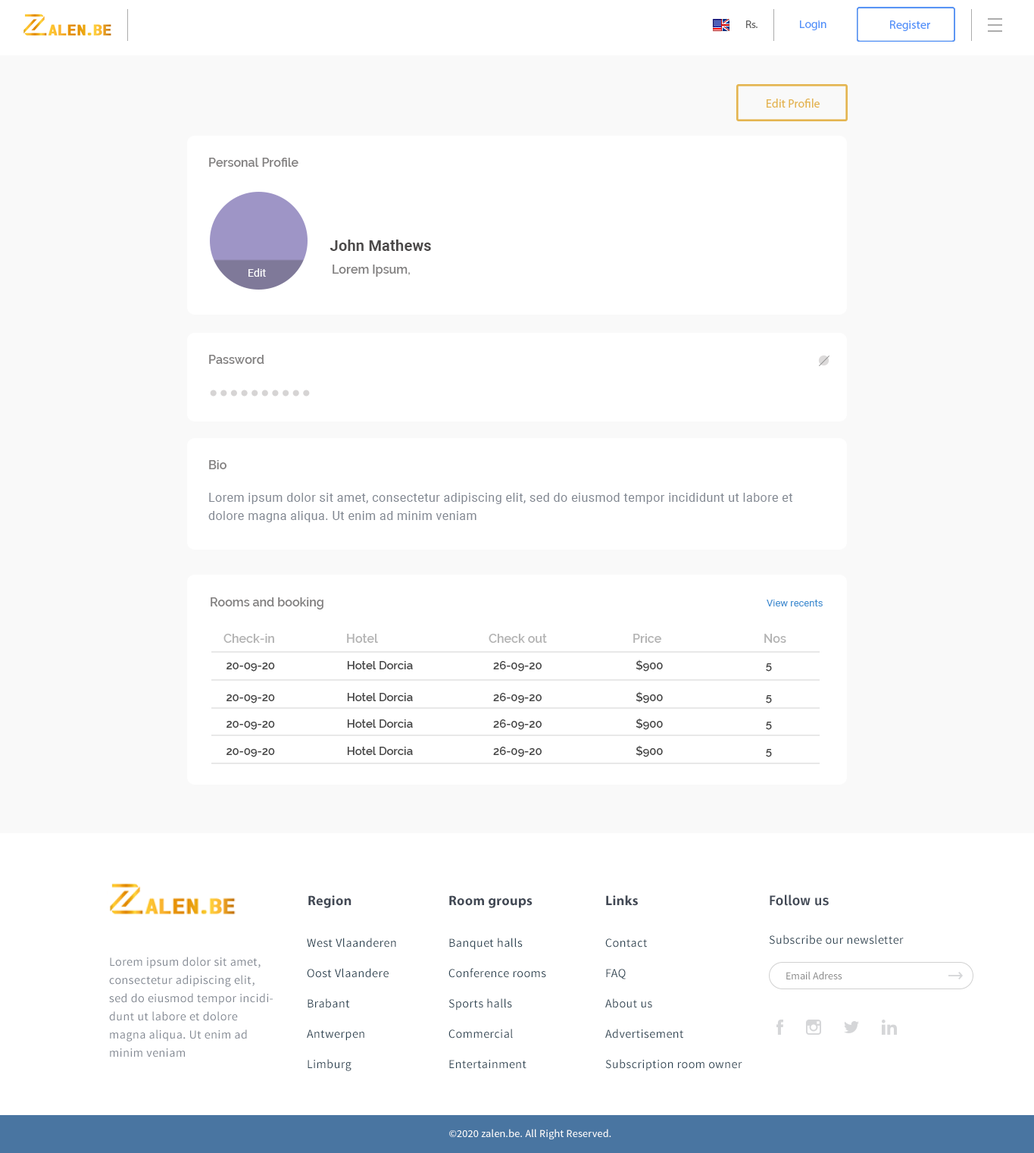
<style>
.page{position:relative;width:1034px;height:1153px;background:#ffffff}
.page>*{position:absolute;margin:0}
.t1{font:10.7px "MyriadPro-Regular";color:#636363;scale:1.04 1}
.t2{font:11.1px "MyriadPro-Regular";color:#5392f9;scale:1.07 1}
.t3{font:12.1px "MyriadPro-Regular";color:#5392f9}
.t4{font:12.1px "MyriadPro-Regular";color:#e4b551}
.t5{font:12.1px "Raleway-SemiBold";color:#817f7f}
.t6{font:15.2px "Roboto-Bold";letter-spacing:0.01em;color:#4b4949}
.t7{font:10.6px "Roboto-Regular";letter-spacing:0.01em;color:#ffffff}
.t8{font:12.1px/18.2px "Roboto-Regular";letter-spacing:0.03em;color:#818791}
.t9{font:9.9px "Roboto-Regular";color:#4290d2}
.t10{font:12.1px "Raleway-SemiBold";color:#b3b3b3}
.t11{font:11.2px "Raleway-SemiBold";color:#444444}
.t12{font:13.6px "MyriadPro-Bold";letter-spacing:0.02em;color:#424955}
.t13{font:13.6px "FiraSans-Medium";letter-spacing:0.02em;color:#424955}
.t14{font:12.1px/30.3px "SourceSansPro-Regular";letter-spacing:0.03em;color:#2e4453}
.t15{font:12.1px "SourceSansPro-Regular";letter-spacing:0.03em;color:#2e4453}
.t16{font:12.1px/18.2px "SourceSansPro-Regular";letter-spacing:0.03em;color:#818791}
.t17{font:10.6px "SourceSansPro-Regular";color:#8c8c8c}
.t18{font:10.6px "SourceSansPro-Regular";letter-spacing:0.02em;color:#ffffff}
</style>
<div class="page">
<p class="t1" style="left:746px;top:20px;width:12px;height:8px">Rs.</p>
<p class="t2" style="left:800px;top:20px;width:27px;height:10px">Login</p>
<p class="t3" style="left:890px;top:20px;width:41px;height:11px">Register</p>
<p class="t4" style="left:767px;top:99px;width:53px;height:9px">Edit Profile</p>
<p class="t5" style="left:209px;top:158px;width:90px;height:9px">Personal Profile</p>
<p class="t6" style="left:330px;top:239px;width:101px;height:12px">John Mathews</p>
<p class="t7" style="left:249px;top:268px;width:17px;height:9px">Edit</p>
<p class="t5" style="left:333px;top:264px;width:77px;height:13px">Lorem Ipsum,</p>
<p class="t5" style="left:209px;top:355px;width:55px;height:9px">Password</p>
<p class="t5" style="left:209px;top:460px;width:18px;height:9px">Bio</p>
<p class="t8" style="left:208px;top:493px;width:585px;height:29px">Lorem ipsum dolor sit amet, consectetur adipiscing elit, sed do eiusmod tempor incididunt ut labore et dolore magna aliqua. Ut enim ad minim veniam</p>
<p class="t5" style="left:211px;top:597px;width:113px;height:12px">Rooms and booking</p>
<p class="t9" style="left:767px;top:599px;width:56px;height:7px">View recents</p>
<p class="t10" style="left:224px;top:634px;width:50px;height:9px">Check-in</p>
<p class="t10" style="left:347px;top:634px;width:31px;height:9px">Hotel</p>
<p class="t10" style="left:489px;top:634px;width:58px;height:9px">Check out</p>
<p class="t10" style="left:634px;top:634px;width:28px;height:9px">Price</p>
<p class="t10" style="left:765px;top:634px;width:22px;height:9px">Nos</p>
<p class="t11" style="left:227px;top:662px;width:48px;height:9px">20-09-20</p>
<p class="t11" style="left:347px;top:661px;width:66px;height:8px">Hotel Dorcia</p>
<p class="t11" style="left:493px;top:661px;width:49px;height:10px">26-09-20</p>
<p class="t11" style="left:636px;top:659px;width:27px;height:12px">$900</p>
<p class="t11" style="left:766px;top:663px;width:6px;height:8px">5</p>
<p class="t11" style="left:227px;top:694px;width:48px;height:9px">20-09-20</p>
<p class="t11" style="left:347px;top:693px;width:66px;height:8px">Hotel Dorcia</p>
<p class="t11" style="left:493px;top:693px;width:49px;height:10px">26-09-20</p>
<p class="t11" style="left:636px;top:691px;width:27px;height:12px">$900</p>
<p class="t11" style="left:766px;top:695px;width:6px;height:8px">5</p>
<p class="t11" style="left:227px;top:721px;width:48px;height:9px">20-09-20</p>
<p class="t11" style="left:347px;top:719px;width:66px;height:9px">Hotel Dorcia</p>
<p class="t11" style="left:493px;top:719px;width:49px;height:11px">26-09-20</p>
<p class="t11" style="left:636px;top:718px;width:27px;height:12px">$900</p>
<p class="t11" style="left:766px;top:721px;width:6px;height:9px">5</p>
<p class="t11" style="left:227px;top:748px;width:48px;height:9px">20-09-20</p>
<p class="t11" style="left:347px;top:746px;width:66px;height:9px">Hotel Dorcia</p>
<p class="t11" style="left:493px;top:746px;width:49px;height:11px">26-09-20</p>
<p class="t11" style="left:636px;top:745px;width:27px;height:12px">$900</p>
<p class="t11" style="left:766px;top:749px;width:6px;height:8px">5</p>
<p class="t12" style="left:308px;top:895px;width:44px;height:13px">Region</p>
<p class="t12" style="left:449px;top:895px;width:84px;height:13px">Room groups</p>
<p class="t12" style="left:606px;top:895px;width:32px;height:11px">Links</p>
<p class="t13" style="left:770px;top:894px;width:59px;height:12px">Follow us</p>
<p class="t14" style="left:307px;top:937px;width:89px;height:134px">West Vlaanderen<br>Oost Vlaandere<br>Brabant<br>Antwerpen<br>Limburg</p>
<p class="t14" style="left:449px;top:937px;width:97px;height:132px">Banquet halls<br>Conference rooms<br>Sports halls<br>Commercial<br>Entertainment</p>
<p class="t14" style="left:606px;top:938px;width:137px;height:133px">Contact<br>FAQ<br>About us<br>Advertisement<br>Subscription room owner</p>
<p class="t15" style="left:769px;top:934px;width:135px;height:10px">Subscribe our newsletter</p>
<p class="t16" style="left:109px;top:956px;width:164px;height:101px">Lorem ipsum dolor sit amet, consectetur adipiscing elit, sed do eiusmod tempor incididunt ut labore et dolore magna aliqua. Ut enim ad minim veniam</p>
<p class="t17" style="left:787px;top:971px;width:56px;height:8px">Email Adress</p>
<p class="t18" style="left:449px;top:1128px;width:163px;height:11px">©2020 zalen.be. All Right Reserved.</p>
</div>
